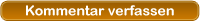
<style>
.page{position:relative;width:200px;height:22px}
.page>*{position:absolute;margin:0}
.t1{font:14px "ArialRoundedMTBold";color:#ffffff}
</style>
<div class="page">
<p class="t1" style="left:26px;top:5px;width:148px;height:11px">Kommentar verfassen</p>
</div>
